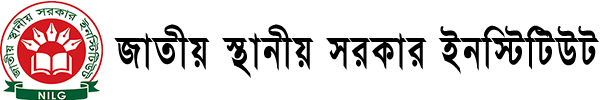
<style>
.page{position:relative;width:600px;height:100px;background:#ffffff}
.page>*{position:absolute;margin:0}
.t1{font:52.7px "SutonnyMJBold";letter-spacing:0.08em;color:#000000;scale:0.74 1}
</style>
<div class="page">
<p class="t1" style="left:114px;top:24px;width:485px;height:54px">RvZxq ¯’vbxq miKvi Bbw÷wUDU</p>
</div>
